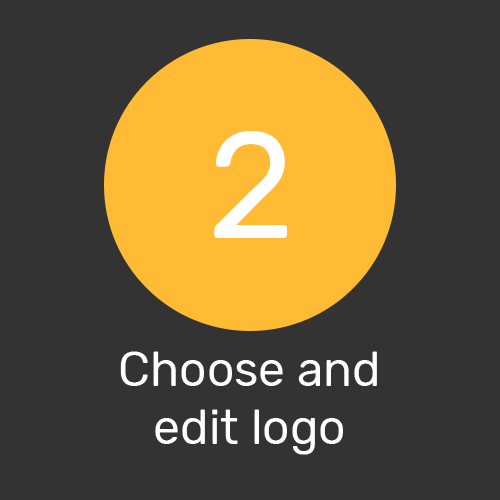
<style>
.page{position:relative;width:500px;height:500px;background:#333333}
.page>*{position:absolute;margin:0}
.t1{font:150px "Rubik-Regular";color:#ffffff}
.t2{font:48px "Rubik-Regular";color:#ffffff}
</style>
<div class="page">
<p class="t1" style="left:214px;top:131px;width:73px;height:107px">2</p>
<p class="t2" style="left:120px;top:351px;width:257px;height:104px;text-align:center">Choose and edit logo</p>
</div>
